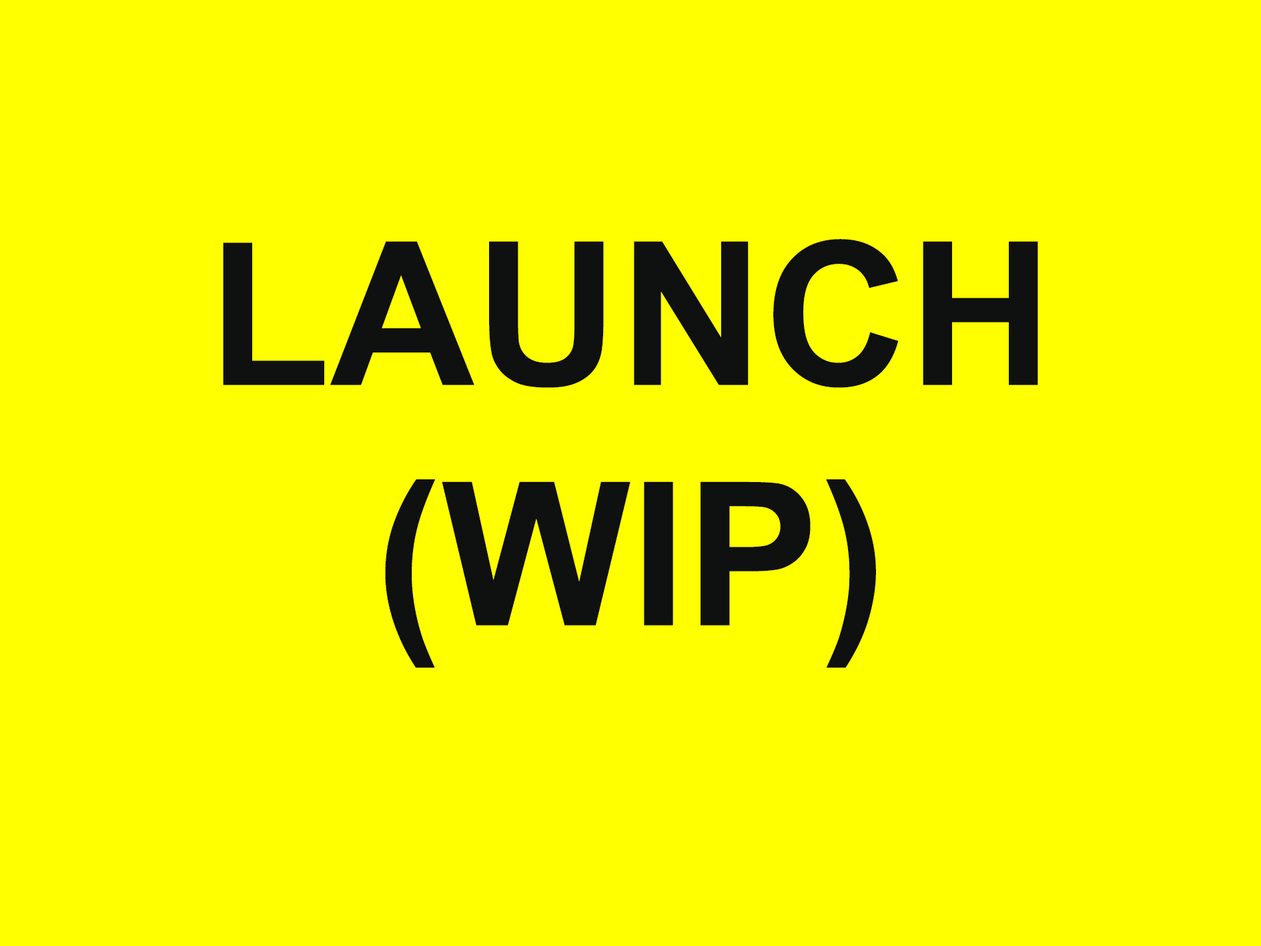
<style>
.page{position:relative;width:1261px;height:946px;background:#ffff00}
.page>*{position:absolute;margin:0}
.t1{font:200.2px "Arial-BoldMT";color:#0f1010}
</style>
<div class="page">
<p class="t1" style="left:223px;top:239px;width:815px;height:428px;text-align:center">LAUNCH<br>(WIP)</p>
</div>
